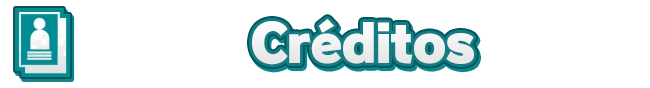
<style>
.page{position:relative;width:650px;height:88px;background:#ffffff}
.page>*{position:absolute;margin:0}
.t1{font:52px "RodinPro-UB";letter-spacing:-0.041em;color:#f0f0f1}
</style>
<div class="page">
<p class="t1" style="left:252px;top:19px;width:222px;height:46px">Créditos</p>
</div>
